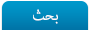
<style>
.page{position:relative;width:90px;height:30px}
.page>*{position:absolute;margin:0}
.t1{font:20px "AdobeArabic-Regular";color:#fbfbfb}
</style>
<div class="page">
<p class="t1" style="left:33px;top:9px;width:25px;height:15px">بحث</p>
</div>
